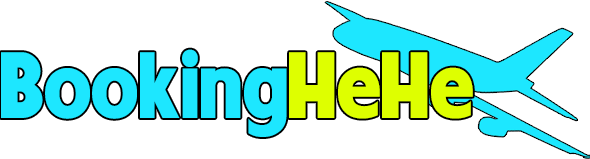
<style>
.page{position:relative;width:590px;height:159px;background:#ffffff}
.page>*{position:absolute;margin:0}
.t1{font:84.1px "UTM-American-Sans";color:#1de7ff}
.t2{font:84.1px "UTM-American-Sans";color:#deff00}
</style>
<div class="page">
<p class="t1" style="left:1px;top:49px;width:472px;height:88px">Booking<span class="t2">HeHe</span></p>
</div>
